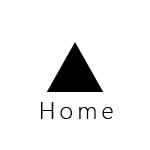
<style>
.page{position:relative;width:150px;height:150px;background:#ffffff}
.page>*{position:absolute;margin:0}
.t1{font:72px "SegoeUI";color:#000000}
.t2{font:24px "SegoeUI-Light";letter-spacing:0.18em;color:#000000}
</style>
<div class="page">
<p class="t1" style="left:46px;top:42px;width:58px;height:50px">▲</p>
<p class="t2" style="left:41px;top:102px;width:72px;height:17px">Home</p>
</div>
